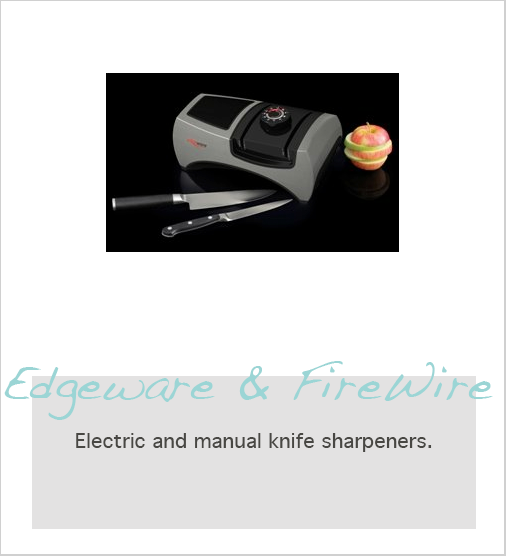
<style>
.page{position:relative;width:506px;height:556px;background:#ffffff}
.page>*{position:absolute;margin:0}
.t1{font:50px "Handwriting-Dakota";color:#9bd5d5}
.t2{font:20px "Geneva";color:#484743}
</style>
<div class="page">
<p class="t1" style="left:4px;top:361px;width:489px;height:59px">Edgeware &amp; FireWire</p>
<p class="t2" style="left:76px;top:433px;width:356px;height:19px">Electric and manual knife sharpeners.</p>
</div>
